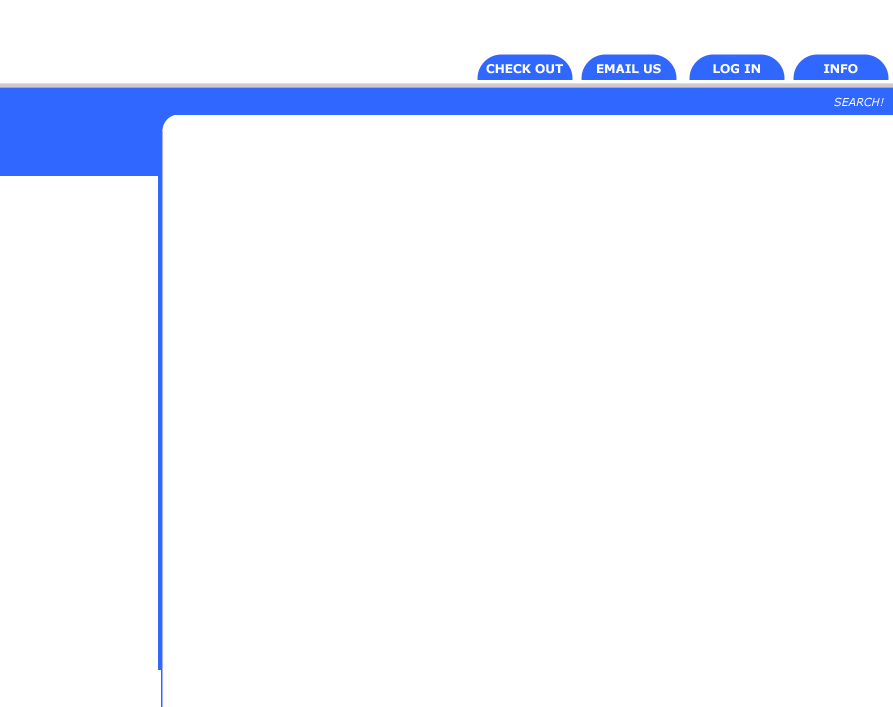
<style>
.page{position:relative;width:893px;height:707px;background:#ffffff}
.page>*{position:absolute;margin:0}
.t1{font:12px "Verdana-Bold";color:#ffffff}
.t2{font:11px "Verdana-Italic";color:#ffffff}
</style>
<div class="page">
<p class="t1" style="left:486px;top:64px;width:77px;height:10px">CHECK OUT</p>
<p class="t1" style="left:597px;top:64px;width:64px;height:10px">EMAIL US</p>
<p class="t1" style="left:713px;top:64px;width:47px;height:10px">LOG IN</p>
<p class="t1" style="left:824px;top:64px;width:34px;height:10px">INFO</p>
<p class="t2" style="left:834px;top:97px;width:50px;height:10px">SEARCH!</p>
</div>
